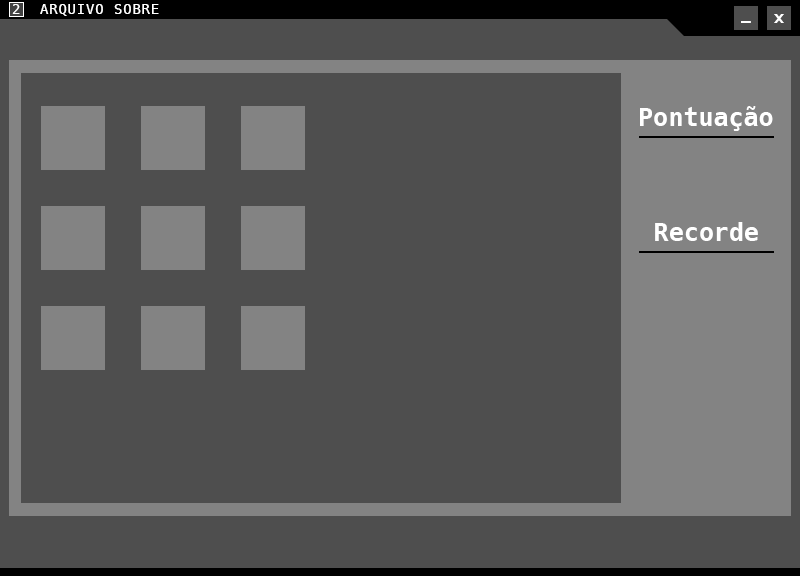
<style>
.page{position:relative;width:800px;height:576px;background:#4e4e4e}
.page>*{position:absolute;margin:0}
.t1{font:13.9px "Hack-Regular";letter-spacing:0.06em;color:#ffffff}
.t2{font:22.2px "koliko-Regular";letter-spacing:0.06em;color:#ffffff}
.t3{font:25px "Hack-Bold";color:#ffffff}
</style>
<div class="page">
<p class="t1" style="left:12px;top:4px;width:8px;height:10px">2</p>
<p class="t1" style="left:40px;top:4px;width:63px;height:12px">ARQUIVO</p>
<p class="t1" style="left:114px;top:4px;width:45px;height:10px">SOBRE</p>
<p class="t2" style="left:774px;top:14px;width:10px;height:9px">x</p>
<p class="t3" style="left:640px;top:106px;width:133px;height:25px">Pontuação</p>
<p class="t3" style="left:655px;top:222px;width:103px;height:19px">Recorde</p>
</div>
